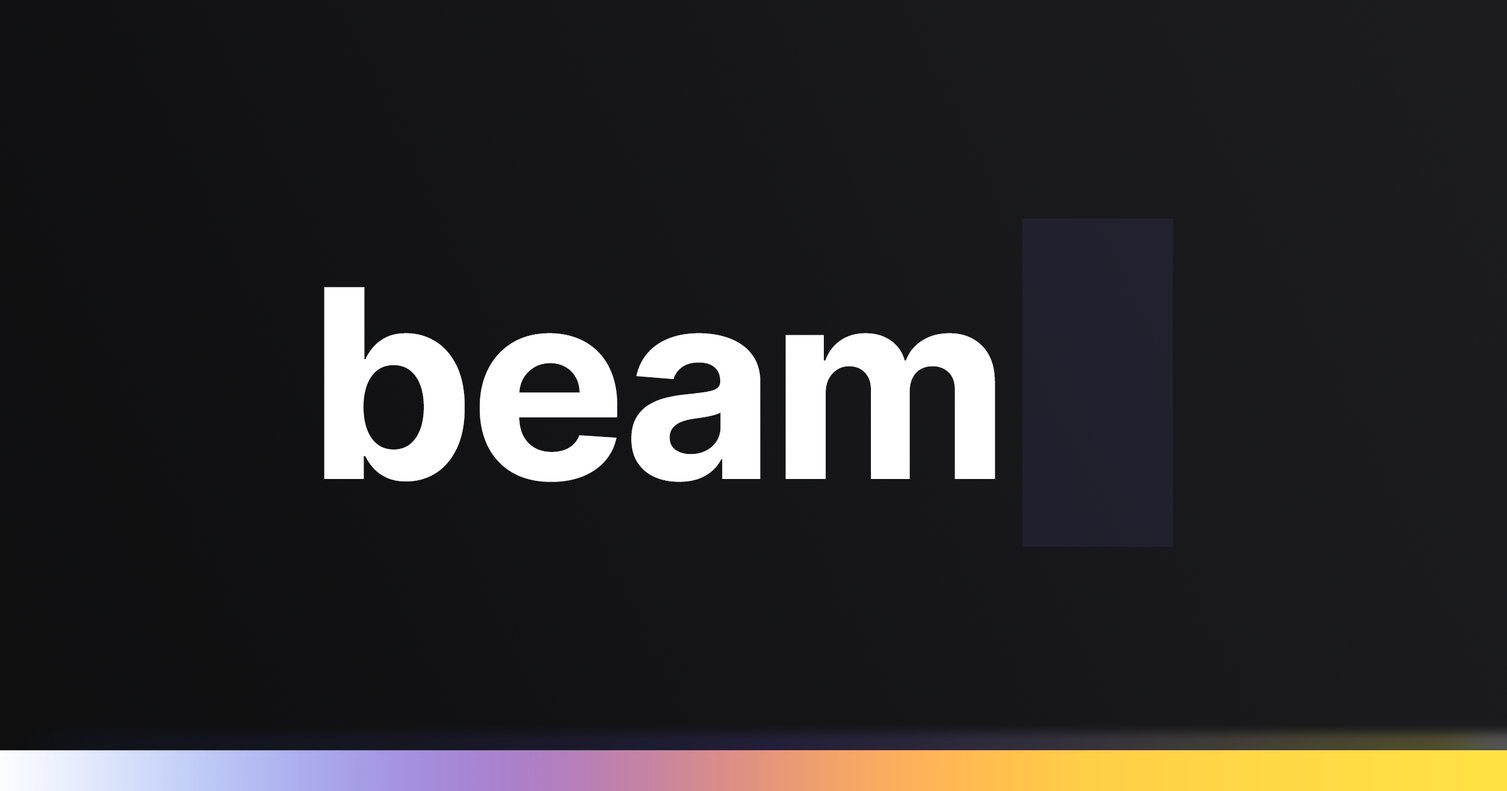
<style>
.page{position:relative;width:1507px;height:791px}
.page>*{position:absolute;margin:0}
.t1{font:263.7px "Inter-Bold";letter-spacing:-0.02em;color:#ffffff}
</style>
<div class="page">
<p class="t1" style="left:324px;top:287px;width:671px;height:195px">beam</p>
</div>
